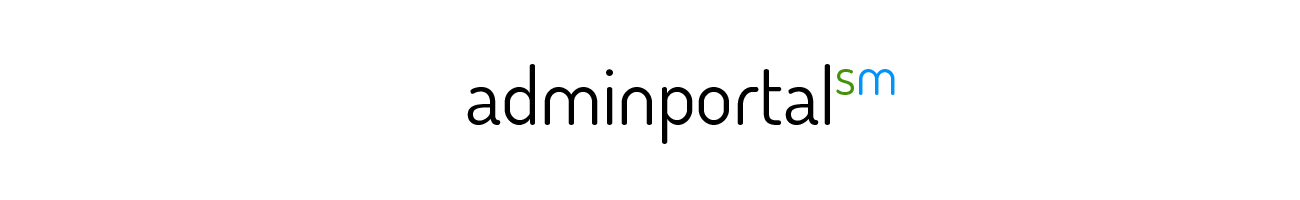
<style>
.page{position:relative;width:1300px;height:200px;background:#ffffff}
.page>*{position:absolute;margin:0}
.t1{font:80px "Dosis-Regular";color:#000000}
.t2{font:92px "Dosis-Regular";color:#459109}
.t3{font:92px "Dosis-Regular";color:#0193f9}
</style>
<div class="page">
<p class="t1" style="left:467px;top:64px;width:428px;height:80px">adminportal<span class="t2">s</span><span class="t3">m</span></p>
</div>
